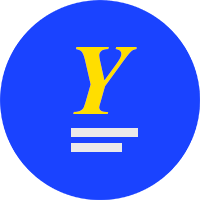
<style>
.page{position:relative;width:200px;height:200px;background:#1a43ff}
.page>*{position:absolute;margin:0}
.t1{font:100.5px "TimesNewRomanPS-BoldItalicMT";color:#ffde00}
</style>
<div class="page">
<p class="t1" style="left:73px;top:47px;width:64px;height:67px">Y</p>
</div>
